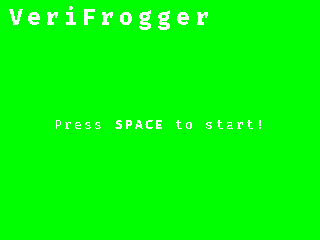
<style>
.page{position:relative;width:320px;height:240px;background:#00ff00}
.page>*{position:absolute;margin:0}
.t1{font:23.1px "FiraCode-Bold";letter-spacing:0.2em;color:#ffffff}
.t2{font:12.6px "FCE";letter-spacing:0.2em;color:#ffffff}
.t3{font:12.6px "FiraCode-Regular";letter-spacing:0.2em;color:#ffffff}
.t4{font:12.6px "FiraCode-Bold";letter-spacing:0.2em;color:#ffffff}
</style>
<div class="page">
<p class="t1" style="left:9px;top:6px;width:199px;height:24px">VeriFrogger</p>
<p class="t2" style="left:56px;top:120px;width:205px;height:9px"><span class="t3">Press </span><span class="t4">SPACE</span> to start!</p>
</div>
